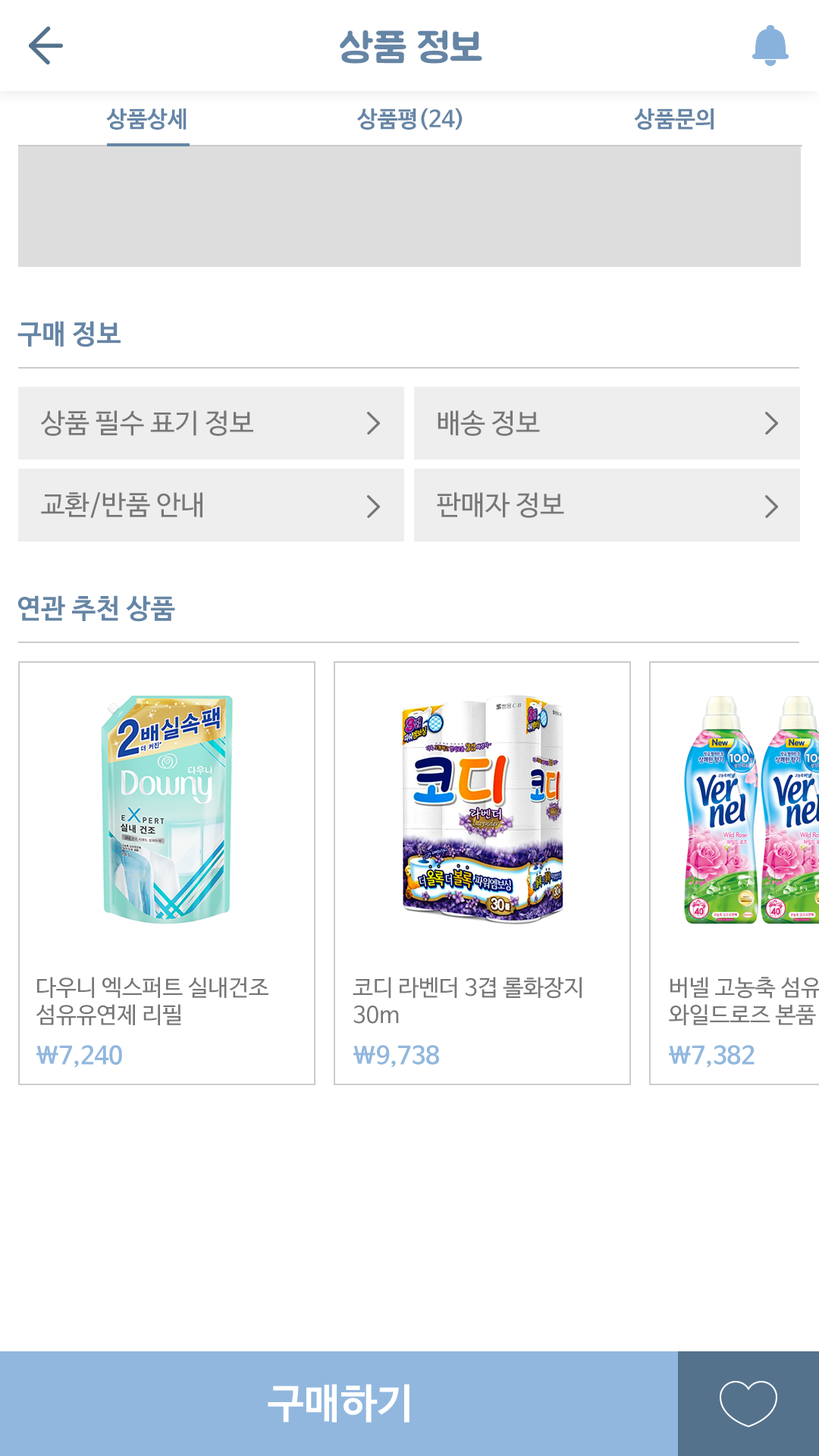
<style>
.page{position:relative;width:819px;height:1456px;background:#ffffff}
.page>*{position:absolute;margin:0}
.t1{font:40.9px "BMJUA";color:#6585a5}
.t2{font:22.7px "NanumBarunGothicBold";color:#6585a5}
.t3{font:27.3px "NanumBarunGothicBold";color:#6585a5}
.t4{font:27.3px "NanumBarunGothic";color:#777777}
.t5{font:22.7px/27.3px "NanumBarunGothic";color:#777777}
.t6{font:24.3px "NanumBarunGothicBold";color:#91b7de}
.t7{font:40.9px "NanumBarunGothicBold";color:#ffffff}
</style>
<div class="page">
<p class="t1" style="left:340px;top:30px;width:142px;height:34px">상품 정보</p>
<p class="t2" style="left:106px;top:108px;width:81px;height:22px">상품상세</p>
<p class="t2" style="left:356px;top:108px;width:107px;height:22px">상품평(24)</p>
<p class="t2" style="left:634px;top:108px;width:80px;height:22px">상품문의</p>
<p class="t3" style="left:17px;top:321px;width:104px;height:26px">구매 정보</p>
<p class="t4" style="left:40px;top:410px;width:213px;height:26px">상품 필수 표기 정보</p>
<p class="t4" style="left:438px;top:410px;width:102px;height:26px">배송 정보</p>
<p class="t4" style="left:41px;top:492px;width:161px;height:26px">교환/반품 안내</p>
<p class="t4" style="left:437px;top:492px;width:127px;height:26px">판매자 정보</p>
<p class="t3" style="left:17px;top:595px;width:158px;height:27px">연관 추천 상품</p>
<p class="t5" style="left:36px;top:977px;width:232px;height:48px">다우니 엑스퍼트 실내건조<br>섬유유연제 리필</p>
<p class="t5" style="left:353px;top:977px;width:229px;height:47px">코디 라벤더 3겹 롤화장지<br>30m</p>
<p class="t6" style="left:36px;top:1045px;width:86px;height:23px">\7,240</p>
<p class="t6" style="left:353px;top:1045px;width:86px;height:23px">\9,738</p>
<p class="t6" style="left:669px;top:1045px;width:86px;height:23px">\7,382</p>
<p class="t7" style="left:268px;top:1384px;width:141px;height:39px">구매하기</p>
</div>
